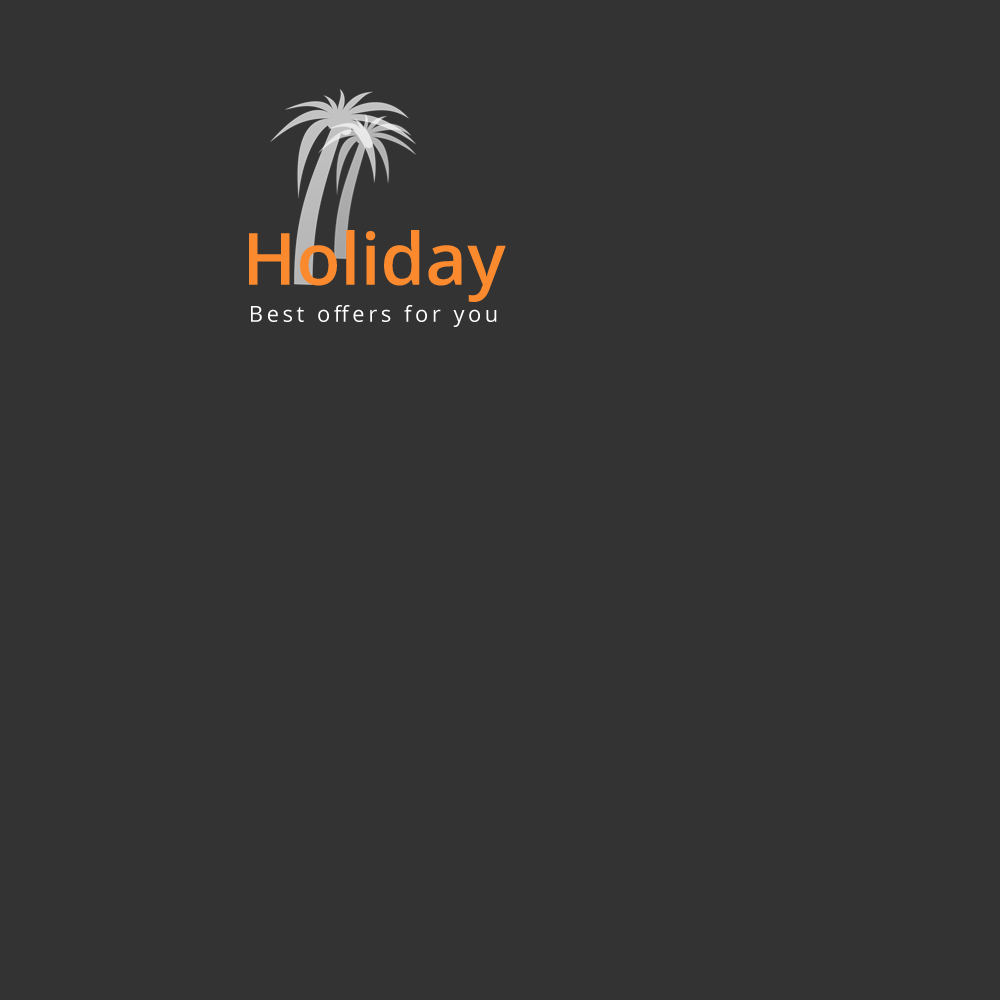
<style>
.page{position:relative;width:1000px;height:1000px;background:#333333}
.page>*{position:absolute;margin:0}
.t1{font:72px "OpenSans-Semibold";color:#fb8a2e}
.t2{font:22px "OpenSans";letter-spacing:0.16em;color:#ffffff}
</style>
<div class="page">
<p class="t1" style="left:249px;top:230px;width:257px;height:72px">Holiday</p>
<p class="t2" style="left:251px;top:305px;width:246px;height:22px">Best offers for you</p>
</div>
